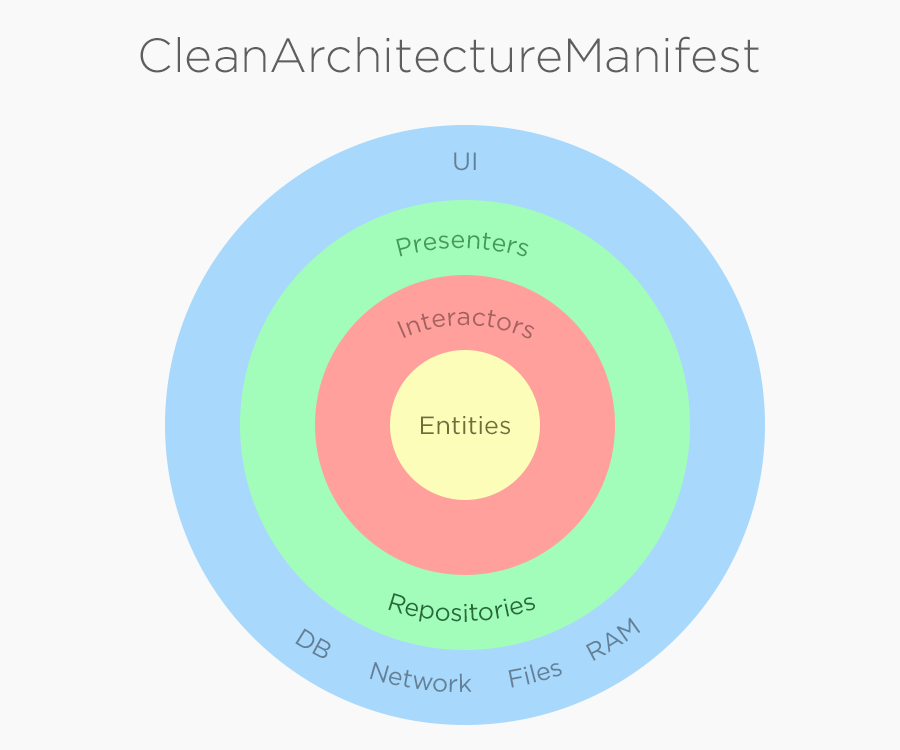
<style>
.page{position:relative;width:900px;height:750px;background:#f9f9f9}
.page>*{position:absolute;margin:0}
.t1{font:48px "GothamPro-Light";color:#5f5d5d}
.t2{font:25px "GothamPro";color:#638096}
.t3{font:25px "GothamPro";color:#45995b}
.t4{font:25px "GothamPro";color:#a26360}
.t5{font:25px "GothamPro";color:#6d6e38}
.t6{font:25px "GothamPro";color:#266a38}
</style>
<div class="page">
<p class="t1" style="left:140px;top:36px;width:619px;height:37px">CleanArchitectureManifest</p>
<p class="t2" style="left:454px;top:152px;width:22px;height:19px">UI</p>
<p class="t3" style="left:396px;top:232px;width:133px;height:25px;rotate:9deg">Presenters</p>
<p class="t4" style="left:397px;top:310px;width:138px;height:29px;rotate:1deg">Interactors</p>
<p class="t5" style="left:421px;top:416px;width:89px;height:19px">Entities</p>
<p class="t6" style="left:388px;top:593px;width:147px;height:29px;rotate:53deg">Repositories</p>
<p class="t2" style="left:295px;top:617px;width:346px;height:75px;rotate:1deg">DB      Network     Files    RAM</p>
</div>
